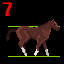
<style>
.page{position:relative;width:64px;height:64px;background:#000000}
.page>*{position:absolute;margin:0}
.t1{font:18px "Krungthep";color:#ff0000}
</style>
<div class="page">
<p class="t1" style="left:2px;top:2px;width:10px;height:14px">7</p>
</div>
